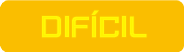
<style>
.page{position:relative;width:184px;height:52px;background:#fabe00}
.page>*{position:absolute;margin:0}
.t1{font:24px "KafuTechnoStd-HV";letter-spacing:0.024em;color:#fff400}
</style>
<div class="page">
<p class="t1" style="left:42px;top:10px;width:105px;height:28px">DIFÍCIL</p>
</div>
